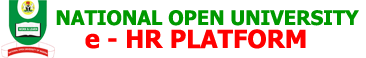
<style>
.page{position:relative;width:366px;height:58px;background:#ffffff}
.page>*{position:absolute;margin:0}
.t1{font:20px "Tahoma-Bold";color:#009900}
.t2{font:25px "Tahoma-Bold";color:#ff0000}
</style>
<div class="page">
<p class="t1" style="left:56px;top:10px;width:303px;height:16px">NATIONAL OPEN UNIVERSITY</p>
<p class="t2" style="left:85px;top:29px;width:221px;height:20px">e - HR PLATFORM</p>
</div>
